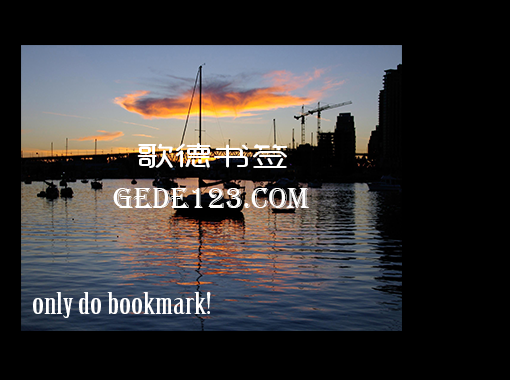
<style>
.page{position:relative;width:510px;height:380px;background:#000000}
.page>*{position:absolute;margin:0}
.t1{font:26.4px "RTWSYueRoudGoDemo-Regular";color:#ffffff;scale:1.45 1}
.t2{font:30px "Algerian";color:#ffffff}
.t3{font:29.6px "BirchStd";color:#ffffff;scale:1.38 1}
</style>
<div class="page">
<p class="t1" style="left:137px;top:143px;width:151px;height:25px">歌德书签</p>
<p class="t2" style="left:113px;top:188px;width:197px;height:20px">gede123.com</p>
<p class="t3" style="left:33px;top:292px;width:178px;height:26px">only do bookmark!</p>
</div>
